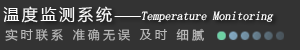
<style>
.page{position:relative;width:300px;height:50px;background:#333333}
.page>*{position:absolute;margin:0}
.t1{font:12px "SimSun";color:#ffffff;font-style:italic}
.t2{font:16px "MicrosoftYaHei";letter-spacing:0.16em;color:#ffffff}
.t3{font:12px "MicrosoftYaHei";color:#ffffff}
.t4{font:12px "MicrosoftYaHei";letter-spacing:0.26em;color:#bababa}
</style>
<div class="page">
<p class="t1" style="left:3px;top:6px;width:271px;height:17px"><span class="t2">温度监测系统</span><span class="t3">——</span>Temperature Monitoring</p>
<p class="t4" style="left:5px;top:28px;width:199px;height:13px">实时联系 准确无误 及时 细腻</p>
</div>
